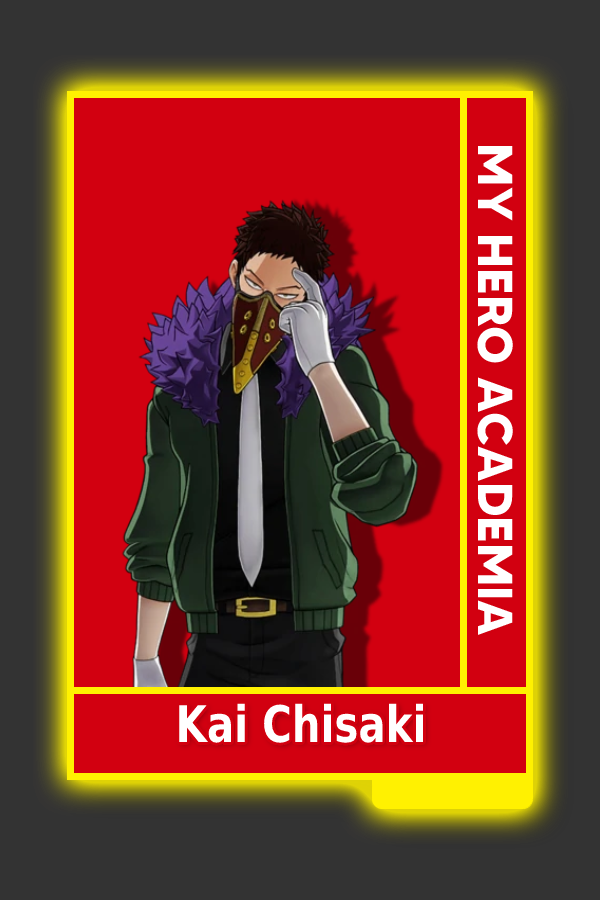
<style>
.page{position:relative;width:600px;height:900px;background:#d20010}
.page>*{position:absolute;margin:0}
.t1{font:48.8px "MADETOMMY-Bold";color:#ffffff}
.t2{font:50.5px "MADETOMMY-Bold";color:#ffffff;scale:0.8 1}
</style>
<div class="page">
<p class="t1" style="left:477px;top:146px;width:36px;height:489px;rotate:90deg">MY HERO ACADEMIA</p>
<p class="t2" style="left:179px;top:703px;width:245px;height:40px">Kai Chisaki</p>
</div>
